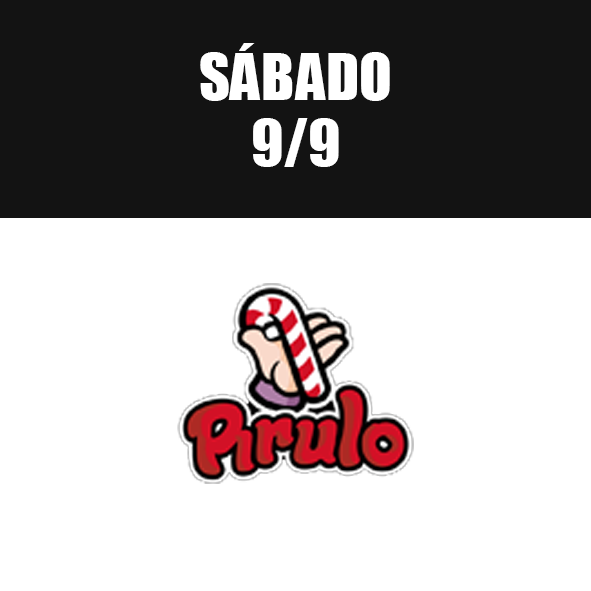
<style>
.page{position:relative;width:591px;height:591px;background:#ffffff}
.page>*{position:absolute;margin:0}
.t1{font:59.8px/66px "Impact";letter-spacing:0.01em;color:#ffffff}
</style>
<div class="page">
<p class="t1" style="left:200px;top:43px;width:190px;height:124px;text-align:center">SÁBADO<br>9/9</p>
</div>
